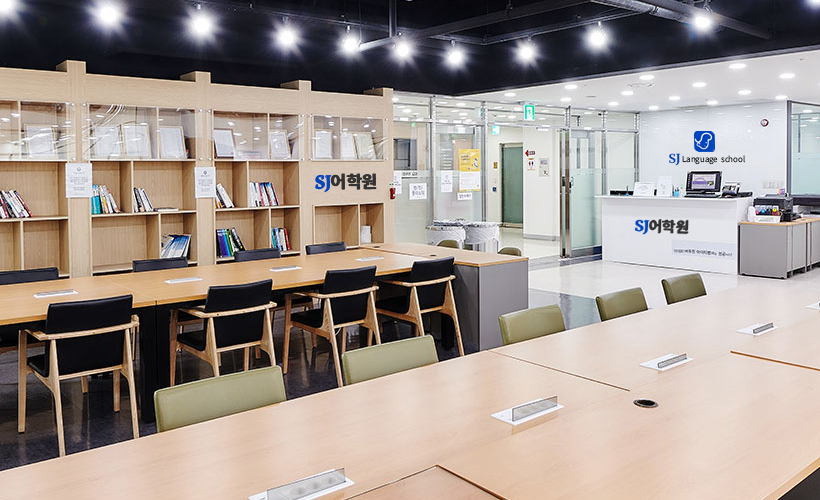
<style>
.page{position:relative;width:820px;height:500px}
.page>*{position:absolute;margin:0}
.t1{font:8px "NotoSansCJKkr-DemiLight";letter-spacing:-0.01em;color:#333333}
.t2{font:12.4px "Merriweather-Bold";letter-spacing:-0.01em;color:#0046bd}
.t3{font:16.9px "NotoSansCJKkr-Bold";letter-spacing:-0.01em;color:#333333}
.t4{font:16.9px "Merriweather-Bold";letter-spacing:-0.01em;color:#0046bd}
</style>
<div class="page">
<p class="t1" style="left:669px;top:153px;width:76px;height:13px;rotate:-1deg"><span class="t2">SJ </span>Language  school</p>
<p class="t3" style="left:315px;top:173px;width:61px;height:20px;rotate:-1deg"><span class="t4">SJ</span>어학원</p>
<p class="t3" style="left:316px;top:173px;width:61px;height:19px;rotate:-1deg"><span class="t4">SJ</span>어학원</p>
<p class="t3" style="left:316px;top:173px;width:61px;height:19px;rotate:-1deg"><span class="t4">SJ</span>어학원</p>
</div>
